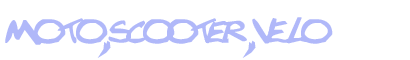
<style>
.page{position:relative;width:410px;height:60px;background:#ffffff}
.page>*{position:absolute;margin:0}
.t1{font:60px "Texted'critureLanfeust";color:#b0b8f9}
</style>
<div class="page">
<p class="t1" style="left:5px;top:17px;width:328px;height:41px">moto,scooter,velo</p>
</div>
